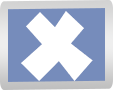
<style>
.page{position:relative;width:113px;height:90px;background:#768cbb}
.page>*{position:absolute;margin:0}
.t1{font:94.7px "SuperMarioGalaxy";color:#ffffff}
</style>
<div class="page">
<p class="t1" style="left:21px;top:11px;width:72px;height:70px">x</p>
</div>
